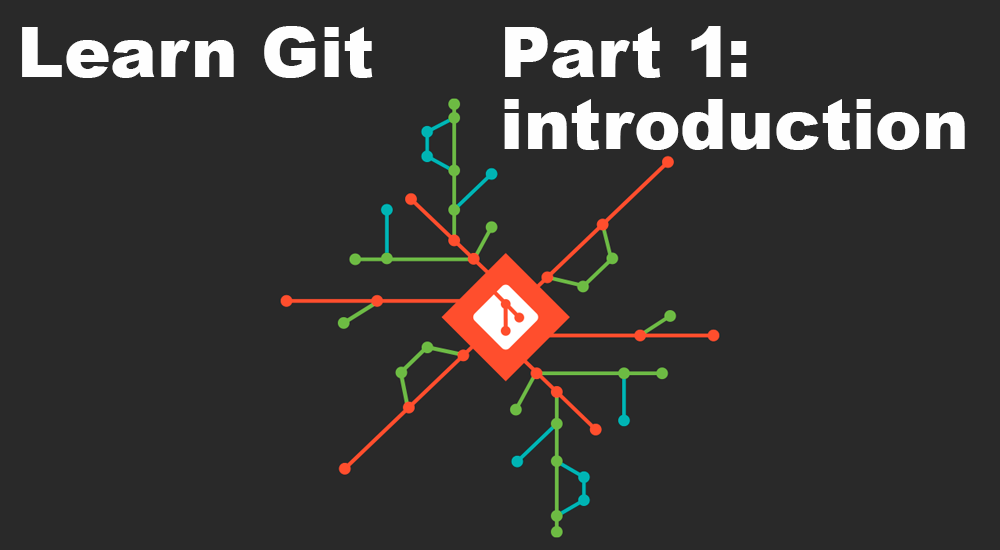
<style>
.page{position:relative;width:1000px;height:550px;background:#292929}
.page>*{position:absolute;margin:0}
.t1{font:70px "Arial-Black";color:#fefefe}
.t2{font:70px/72px "Arial-Black";color:#fefefe}
</style>
<div class="page">
<p class="t1" style="left:22px;top:26px;width:351px;height:52px">Learn Git</p>
<p class="t2" style="left:504px;top:26px;width:461px;height:124px">Part 1:<br>introduction</p>
</div>
